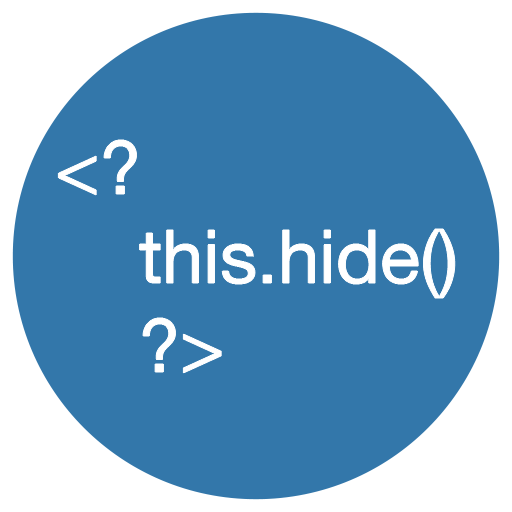
<style>
.page{position:relative;width:512px;height:512px;background:#3377aa}
.page>*{position:absolute;margin:0}
.t1{font:74.1px "HelveticaNeue";color:#ffffff}
</style>
<div class="page">
<p class="t1" style="left:58px;top:140px;width:397px;height:233px">&lt;? <br>    this.hide()<br>    ?&gt;</p>
</div>
